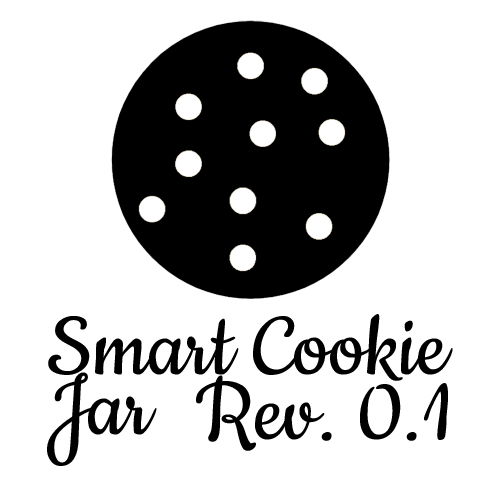
<style>
.page{position:relative;width:500px;height:500px;background:#ffffff}
.page>*{position:absolute;margin:0}
.t1{font:100px/60px "Cookie-Regular";color:#000000}
.t2{font:100px "Cookie-Regular";color:#000000}
</style>
<div class="page">
<p class="t1" style="left:47px;top:314px;width:406px;height:152px">Smart Cookie<br>Jar</p>
<p class="t2" style="left:196px;top:375px;width:252px;height:76px">Rev. 0.1</p>
</div>
